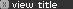
<style>
.page{position:relative;width:73px;height:9px;background:#333333}
.page>*{position:absolute;margin:0}
.t1{font:8px "PFTempestaSeven";color:#ffffff}
</style>
<div class="page">
<p class="t1" style="left:12px;top:1px;width:45px;height:7px">view title</p>
</div>
